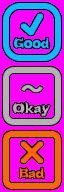
<style>
.page{position:relative;width:64px;height:192px;background:#ff00ff}
.page>*{position:absolute;margin:0}
.t1{font:14px/16px "Bundy-Regular";letter-spacing:-0.01em;color:#0bbcfe;font-weight:bold}
.t2{font:22px/16px "SegoeUIEmoji";letter-spacing:-0.01em;color:#0bbcfe;font-weight:bold}
.t3{font:14px/16px "Bundy-Regular";letter-spacing:-0.01em;color:#b3b3b3;font-weight:bold}
.t4{font:22px/16px "KozGoPr6N-Bold";letter-spacing:-0.01em;color:#b3b3b3;font-weight:bold}
.t5{font:14px/18px "Bundy-Regular";letter-spacing:-0.01em;color:#ff6600;font-weight:bold}
.t6{font:22px/18px "SegoeUIEmoji";letter-spacing:-0.01em;color:#ff6600;font-weight:bold}
</style>
<div class="page">
<p class="t1" style="left:14px;top:13px;width:35px;height:36px;text-align:center"><span class="t2">✔️<br></span>Good</p>
<p class="t3" style="left:13px;top:85px;width:38px;height:32px;text-align:center"><span class="t4">～<br></span>Okay</p>
<p class="t5" style="left:19px;top:141px;width:25px;height:38px;text-align:center"><span class="t6">❌<br></span>Bad</p>
</div>
